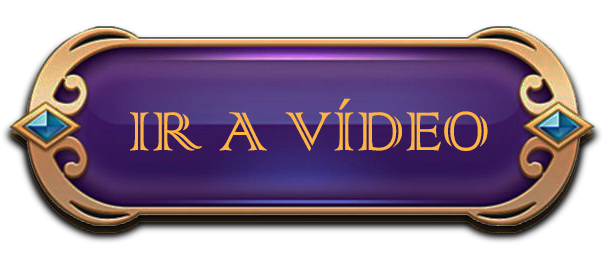
<style>
.page{position:relative;width:614px;height:264px;background:#ffffff}
.page>*{position:absolute;margin:0}
.t1{font:72px "ColonnaMT";color:#fdb441}
</style>
<div class="page">
<p class="t1" style="left:129px;top:98px;width:358px;height:53px">IR A VÍDEO</p>
<p class="t1" style="left:130px;top:98px;width:358px;height:53px">IR A VÍDEO</p>
</div>
